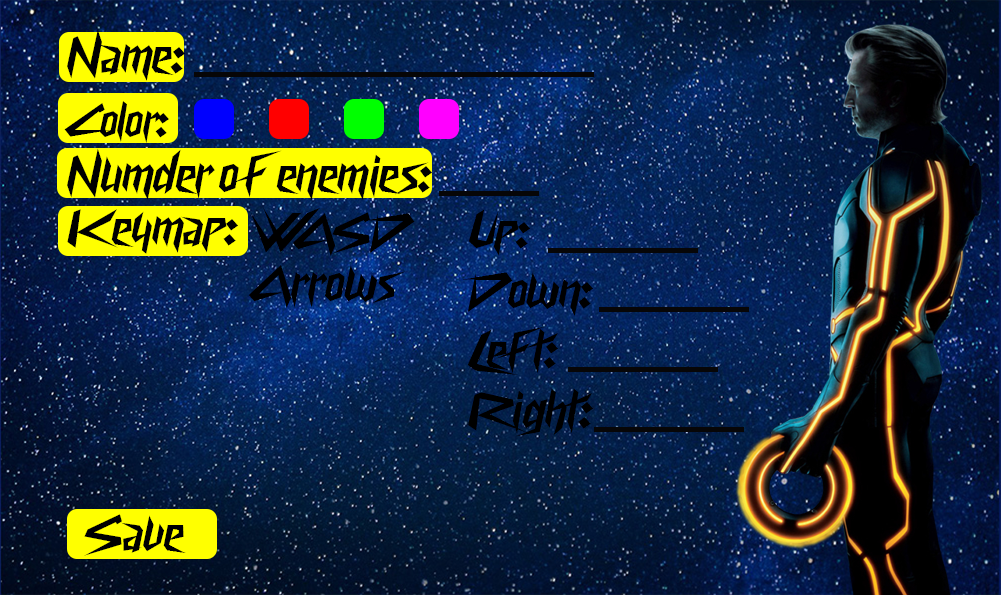
<style>
.page{position:relative;width:1001px;height:595px}
.page>*{position:absolute;margin:0}
.t1{font:50px "CyberwayRiders";color:#000000}
.t2{font:45.8px "CyberwayRiders";color:#000000}
</style>
<div class="page">
<p class="t1" style="left:67px;top:29px;width:118px;height:52px">Name:</p>
<p class="t2" style="left:64px;top:101px;width:105px;height:43px">Color:</p>
<p class="t1" style="left:67px;top:148px;width:365px;height:52px">Numder of  enemies:</p>
<p class="t1" style="left:67px;top:209px;width:171px;height:45px">Keymap:</p>
<p class="t1" style="left:251px;top:207px;width:164px;height:50px">WASD</p>
<p class="t1" style="left:462px;top:209px;width:131px;height:228px">Up:<br>Down:<br>Left:<br>Right:</p>
<p class="t1" style="left:248px;top:265px;width:157px;height:44px">Arrows</p>
<p class="t1" style="left:84px;top:514px;width:102px;height:42px">Save</p>
</div>
